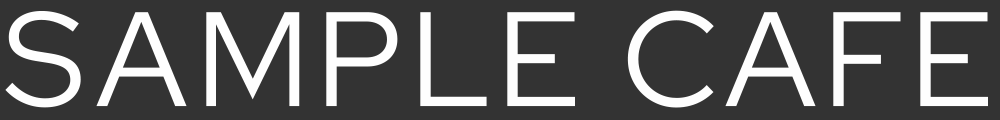
<style>
.page{position:relative;width:1000px;height:120px;background:#333333}
.page>*{position:absolute;margin:0}
.t1{font:133.8px "RedHatDisplayRoman-Regular";letter-spacing:0.05em;color:#fefefe}
</style>
<div class="page">
<p class="t1" style="left:5px;top:10px;width:983px;height:98px">SAMPLE CAFE</p>
</div>
